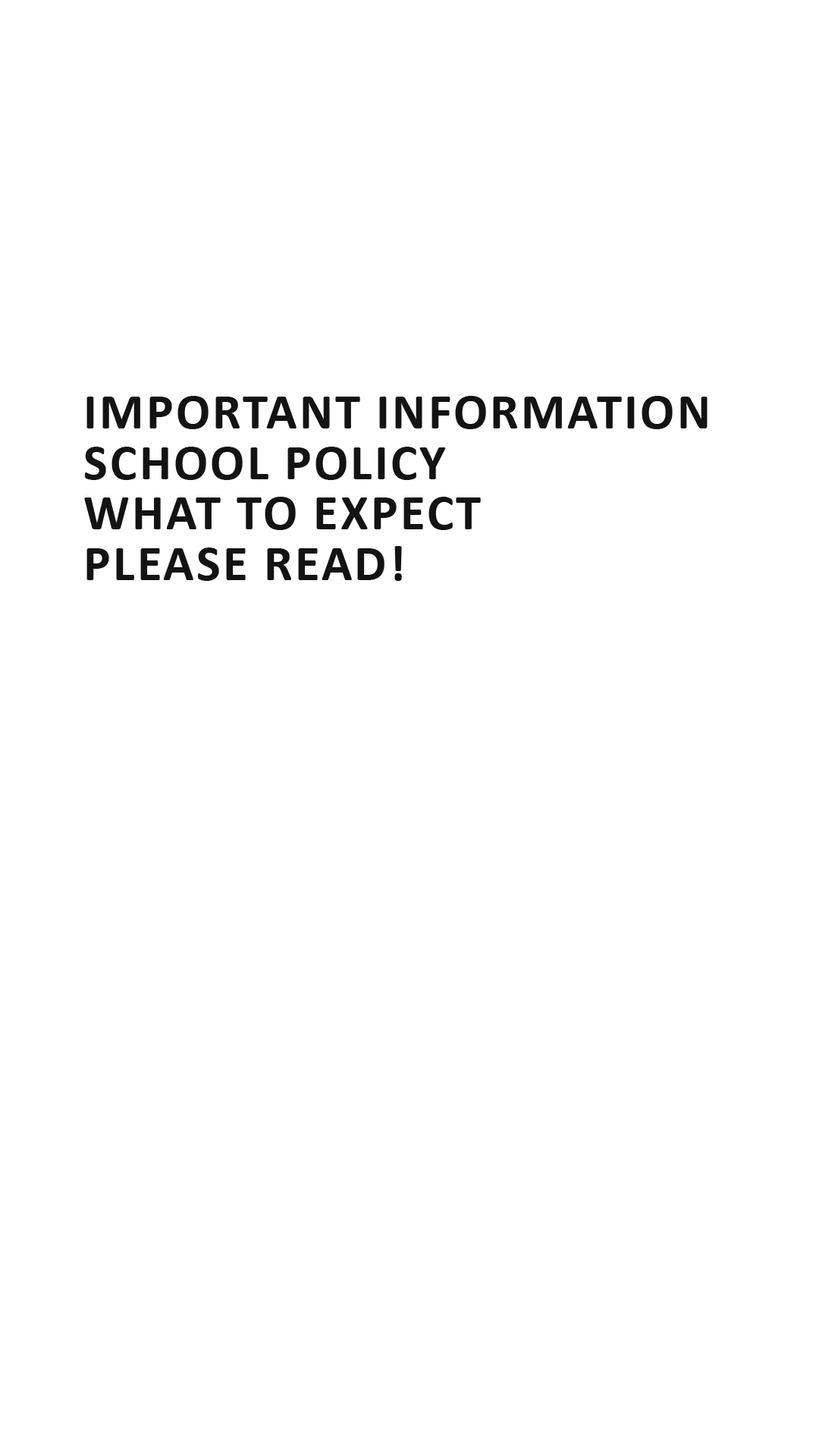
<style>
.page{position:relative;width:819px;height:1456px;background:#ffffff}
.page>*{position:absolute;margin:0}
.t1{font:50.4px/50.4px "Calibri-Bold";letter-spacing:0.05em;color:#131314}
</style>
<div class="page">
<p class="t1" style="left:84px;top:396px;width:624px;height:185px">IMPORTANT INFORMATION<br>SCHOOL POLICY<br>WHAT TO EXPECT<br>PLEASE READ!</p>
</div>
